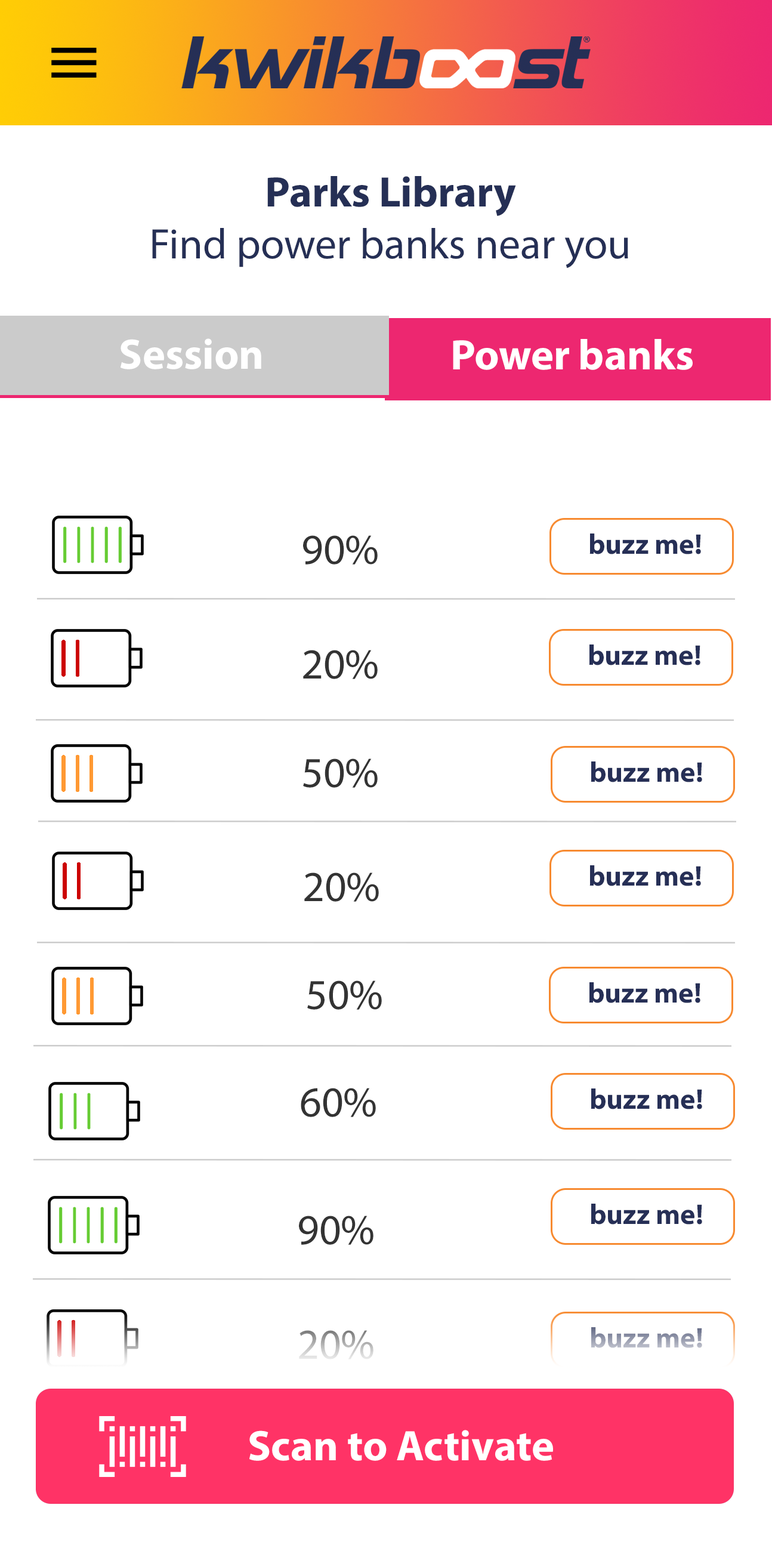
<style>
.page{position:relative;width:772px;height:1545px;background:#ffffff}
.page>*{position:absolute;margin:0}
.t1{font:43px "MyriadPro-Regular";color:#252f55}
.t2{font:43px "MyriadPro-Bold";color:#252f55}
.t3{font:43px "MyriadPro-Bold";color:#ffffff}
.t4{font:28.6px "MyriadPro-Bold";color:#262f56}
.t5{font:43px "MyriadPro-Regular";color:#333333}
.t6{font:43px "MyriadPro-Regular"}
.t7{font:28.6px "MyriadPro-Bold"}
</style>
<div class="page">
<p class="t1" style="left:152px;top:176px;width:476px;height:92px;text-align:center"><span class="t2">Parks Library<br></span>Find power banks near you</p>
<p class="t3" style="left:121px;top:338px;width:140px;height:31px">Session</p>
<p class="t3" style="left:453px;top:339px;width:240px;height:31px">Power banks</p>
<p class="t4" style="left:589px;top:533px;width:112px;height:21px">buzz me!</p>
<p class="t5" style="left:303px;top:535px;width:75px;height:29px">90%</p>
<p class="t5" style="left:303px;top:650px;width:75px;height:29px">20%</p>
<p class="t4" style="left:589px;top:644px;width:111px;height:21px">buzz me!</p>
<p class="t5" style="left:303px;top:758px;width:75px;height:30px">50%</p>
<p class="t4" style="left:591px;top:761px;width:111px;height:21px">buzz me!</p>
<p class="t4" style="left:589px;top:865px;width:112px;height:21px">buzz me!</p>
<p class="t5" style="left:304px;top:872px;width:75px;height:29px">20%</p>
<p class="t5" style="left:307px;top:980px;width:75px;height:29px">50%</p>
<p class="t4" style="left:589px;top:982px;width:111px;height:21px">buzz me!</p>
<p class="t5" style="left:301px;top:1088px;width:75px;height:29px">60%</p>
<p class="t4" style="left:591px;top:1088px;width:111px;height:21px">buzz me!</p>
<p class="t4" style="left:591px;top:1203px;width:111px;height:21px">buzz me!</p>
<p class="t5" style="left:299px;top:1215px;width:74px;height:30px">90%</p>
<p class="t6" style="left:299px;top:1330px;width:74px;height:29px">20%</p>
<p class="t7" style="left:591px;top:1327px;width:111px;height:21px">buzz me!</p>
<p class="t3" style="left:249px;top:1429px;width:304px;height:31px">Scan to Activate</p>
</div>
